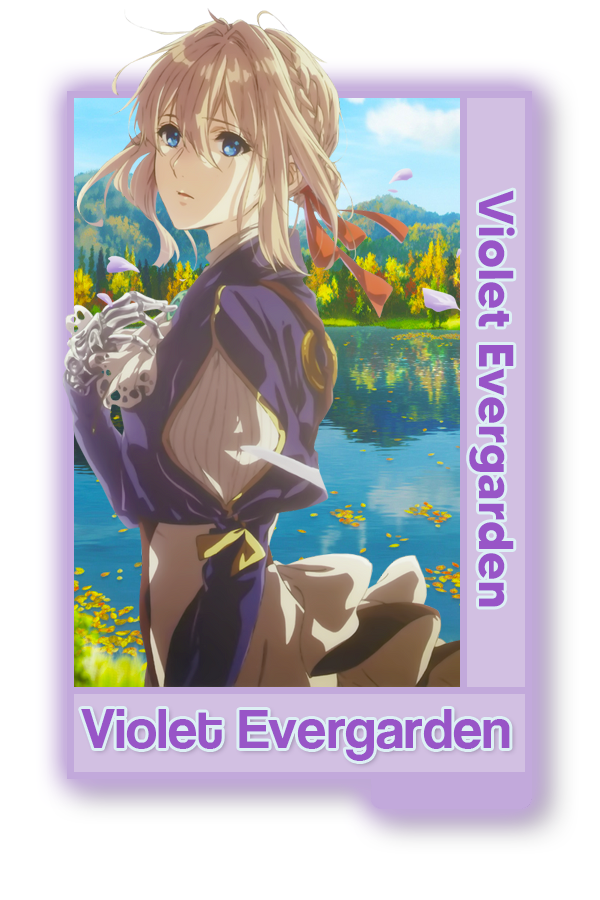
<style>
.page{position:relative;width:600px;height:900px;background:#ffffff}
.page>*{position:absolute;margin:0}
.t1{font:48.8px "MADETOMMY-Bold";color:#976dba}
.t2{font:58px "CoolveticaRg-Regular";color:#976dba}
</style>
<div class="page">
<p class="t1" style="left:469px;top:190px;width:46px;height:417px;rotate:90deg">Violet Evergarden</p>
<p class="t2" style="left:81px;top:709px;width:429px;height:52px">Violet Evergarden</p>
</div>
